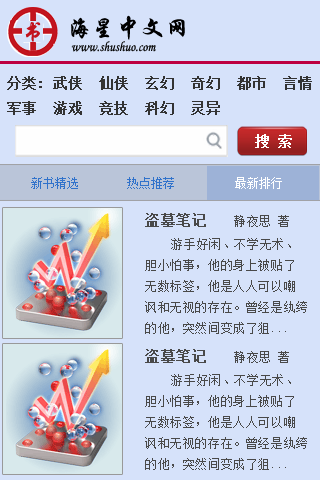
<style>
.page{position:relative;width:320px;height:480px;background:#d6e2fa}
.page>*{position:absolute;margin:0}
.t1{font:24px "STXingkai";letter-spacing:0.025em;color:#090909}
.t2{font:14px "STLiti";color:#090909;scale:0.9 1}
.t3{font:14px "SimSun";color:#ffffff;font-weight:bold}
.t4{font:12px "SimSun";color:#3072cb}
.t5{font:12px "SimSun";color:#ffffff}
.t6{font:12px "SimSun";letter-spacing:0.05em;color:#494949}
.t7{font:14px "SimSun";letter-spacing:0.05em;color:#494949;font-weight:bold}
</style>
<div class="page">
<p class="t1" style="left:71px;top:15px;width:114px;height:25px">海星中文网</p>
<p class="t2" style="left:71px;top:41px;width:85px;height:11px">www.shushuo.com</p>
<p class="t3" style="left:255px;top:134px;width:37px;height:14px">搜 索</p>
<p class="t4" style="left:31px;top:177px;width:251px;height:12px">新书精选        热点推荐          <span class="t5">最新排行</span></p>
<p class="t6" style="left:145px;top:213px;width:162px;height:121px"><span class="t7">盗墓笔记   </span>静夜思 著<br>    游手好闲、不学无术、<br>胆小怕事，他的身上被贴了<br>无数标签，他是人人可以嘲<br>讽和无视的存在。曾经是纨绔<br>的他，突然间变成了狙...</p>
<p class="t6" style="left:145px;top:349px;width:162px;height:121px"><span class="t7">盗墓笔记   </span>静夜思 著<br>    游手好闲、不学无术、<br>胆小怕事，他的身上被贴了<br>无数标签，他是人人可以嘲<br>讽和无视的存在。曾经是纨绔<br>的他，突然间变成了狙...</p>
</div>
